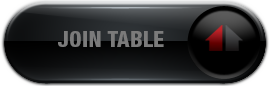
<style>
.page{position:relative;width:270px;height:86px}
.page>*{position:absolute;margin:0}
.t1{font:21.6px "cirHELVn-TezKond";letter-spacing:0.02em;color:#7c7c7c}
</style>
<div class="page">
<p class="t1" style="left:58px;top:31px;width:106px;height:16px">JOIN TABLE</p>
<p class="t1" style="left:105px;top:31px;width:106px;height:16px">JOIN TABLE</p>
</div>
